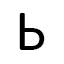
<style>
.page{position:relative;width:64px;height:64px;background:#ffffff}
.page>*{position:absolute;margin:0}
.t1{font:58.3px "Calibri";color:#000000}
</style>
<div class="page">
<p class="t1" style="left:19px;top:13px;width:26px;height:37px">Ь</p>
</div>
